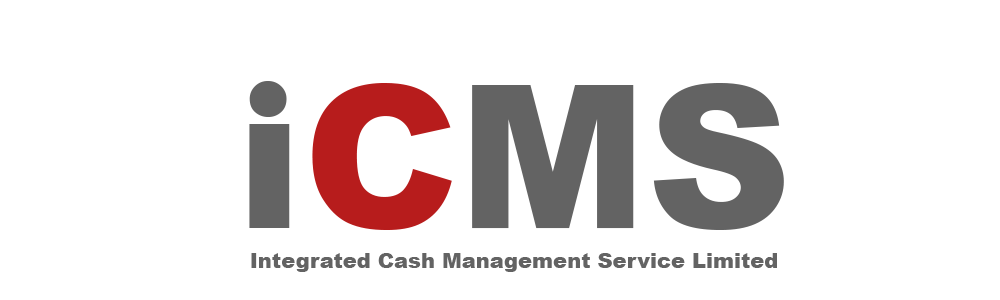
<style>
.page{position:relative;width:1000px;height:300px;background:#ffffff}
.page>*{position:absolute;margin:0}
.t1{font:250px "ArialRoundedMTBold";color:#636363}
.t2{font:21px "Arial-Black";color:#636363}
</style>
<div class="page">
<p class="t1" style="left:249px;top:81px;width:38px;height:36px">.</p>
<p class="t2" style="left:251px;top:253px;width:526px;height:19px">Integrated Cash Management Service Limited</p>
</div>
